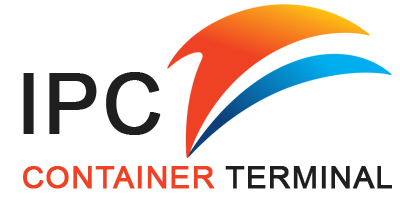
<style>
.page{position:relative;width:400px;height:200px;background:#ffffff}
.page>*{position:absolute;margin:0}
.t1{font:84px "ArialMT";letter-spacing:0.02em;color:#1f1f1f;font-weight:bold}
.t2{font:31px "ArialMT";letter-spacing:0.022em;color:#ef4123;font-weight:bold}
.t3{font:31px "ArialMT";letter-spacing:0.022em;color:#1f1f1f;font-weight:bold}
</style>
<div class="page">
<p class="t1" style="left:23px;top:72px;width:138px;height:63px">IPC</p>
<p class="t2" style="left:23px;top:166px;width:369px;height:23px">CONTAINER<span class="t3"> TERMINAL</span></p>
</div>
